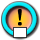
<style>
.page{position:relative;width:40px;height:40px;background:#ffffff}
.page>*{position:absolute;margin:0}
.t1{font:30.2px "Kokila";letter-spacing:0.025em;color:#000000;font-weight:bold;scale:1.11 1}
</style>
<div class="page">
<p class="t1" style="left:17px;top:9px;width:5px;height:17px">!</p>
</div>
